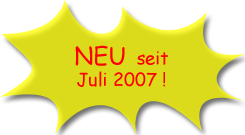
<style>
.page{position:relative;width:245px;height:135px;background:#ffffff}
.page>*{position:absolute;margin:0}
.t1{font:18px "ComicSansMS";color:#ff0000}
.t2{font:24px "ComicSansMS";color:#ff0000}
</style>
<div class="page">
<p class="t1" style="left:75px;top:45px;width:93px;height:42px;text-align:center"><span class="t2">NEU </span>seit<br>Juli 2007 !</p>
</div>
